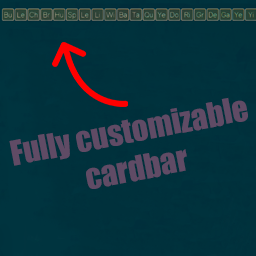
<style>
.page{position:relative;width:256px;height:256px;background:#00313c}
.page>*{position:absolute;margin:0}
.t1{font:31.8px "Impact";color:#604b65}
</style>
<div class="page">
<p class="t1" style="left:9px;top:97px;width:239px;height:92px;text-align:center;rotate:-11deg">Fully customizable<br>cardbar</p>
</div>
